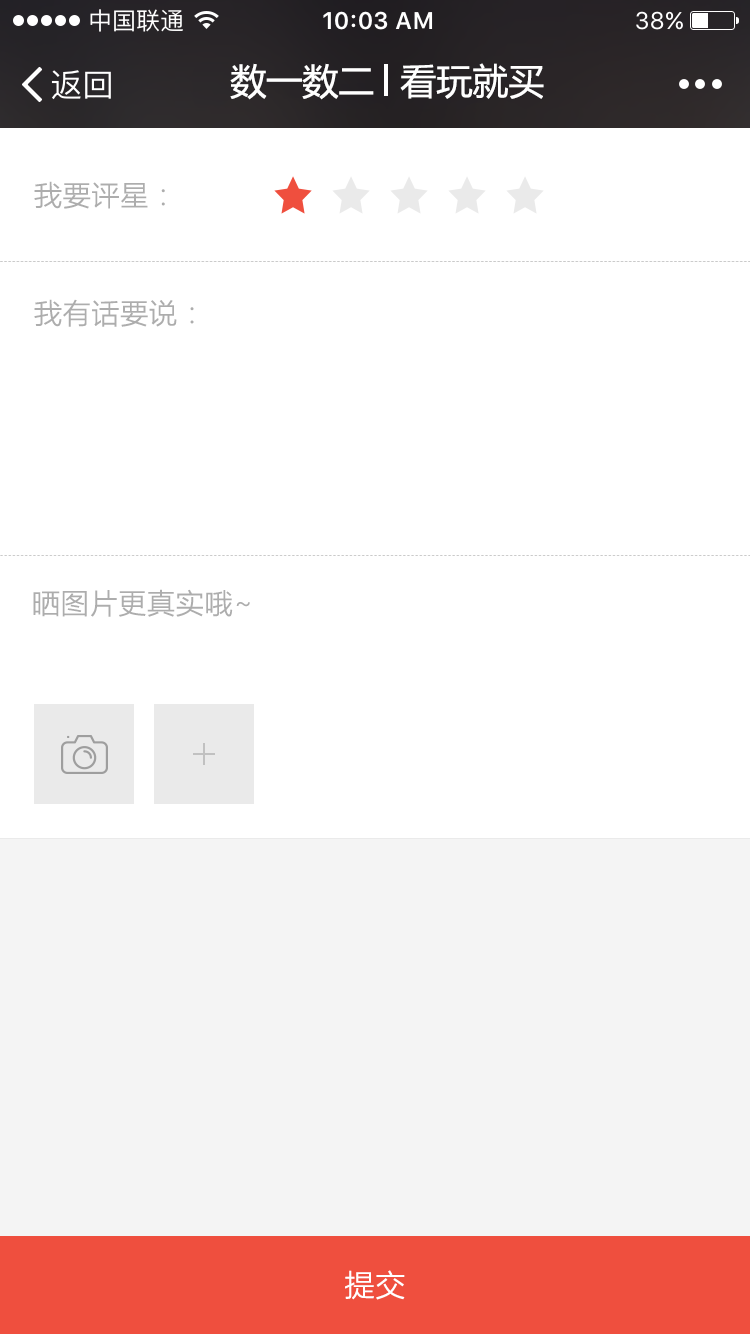
<style>
.page{position:relative;width:750px;height:1334px;background:#ffffff}
.page>*{position:absolute;margin:0}
.t1{font:36px "MicrosoftYaHei";color:#ffffff}
.t2{font:28px "MicrosoftYaHeiLight";color:#adadad;font-weight:bold}
.t3{font:30px "MicrosoftYaHeiLight";color:#ffffff;font-weight:bold}
</style>
<div class="page">
<p class="t1" style="left:230px;top:63px;width:144px;height:37px">数一数二</p>
<p class="t1" style="left:400px;top:63px;width:144px;height:36px">看玩就买</p>
<p class="t2" style="left:34px;top:181px;width:131px;height:28px">我要评星：</p>
<p class="t2" style="left:34px;top:299px;width:160px;height:28px">我有话要说：</p>
<p class="t2" style="left:33px;top:589px;width:217px;height:28px">晒图片更真实哦~</p>
<p class="t3" style="left:345px;top:1270px;width:60px;height:30px">提交</p>
</div>
